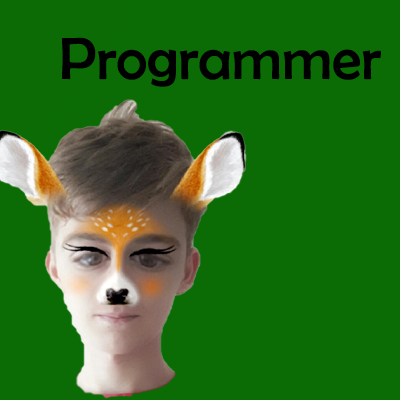
<style>
.page{position:relative;width:400px;height:400px;background:#0b6b04}
.page>*{position:absolute;margin:0}
.t1{font:60px "BerlinSansFB-Reg";color:#000000}
</style>
<div class="page">
<p class="t1" style="left:61px;top:37px;width:320px;height:50px">Programmer</p>
</div>
